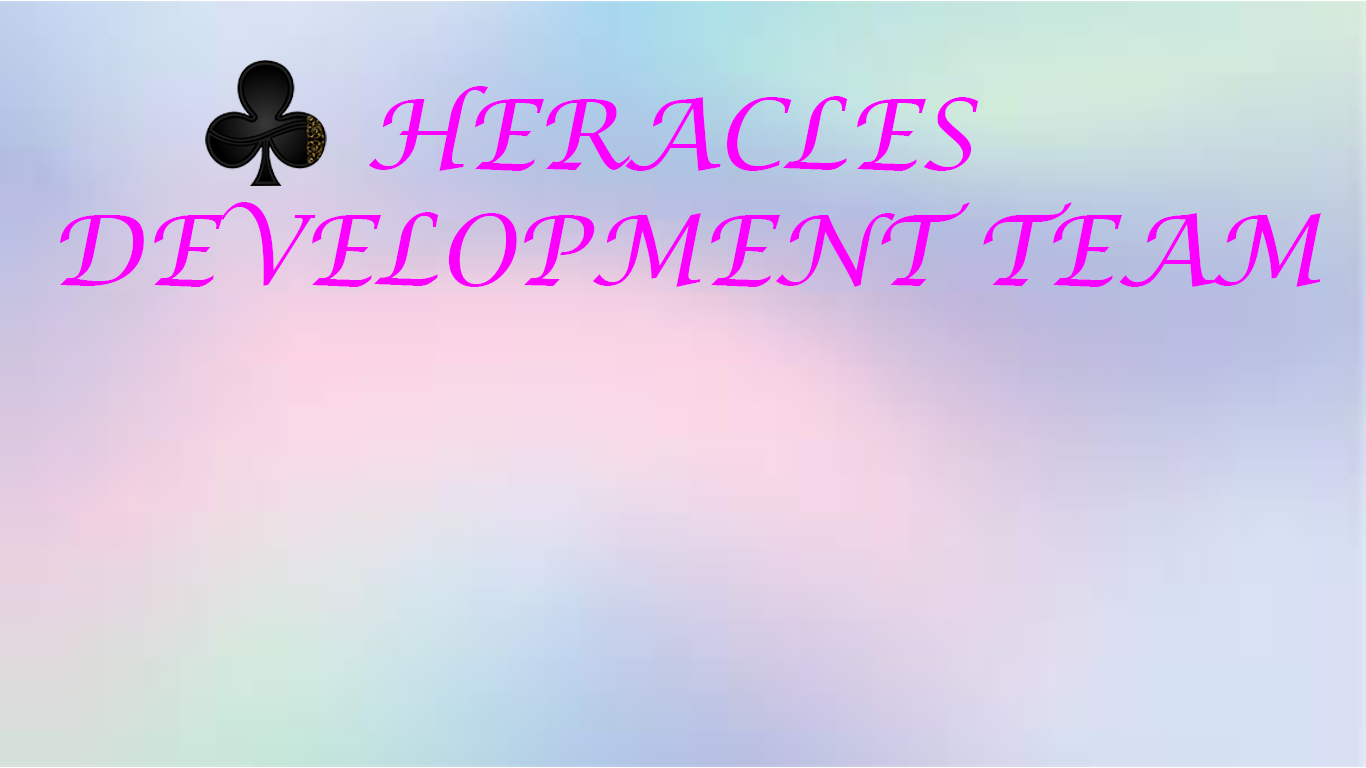
<style>
.page{position:relative;width:1366px;height:768px}
.page>*{position:absolute;margin:0}
.t1{font:97px "LucidaCalligraphy-Italic";color:#fc00ff}
</style>
<div class="page">
<p class="t1" style="left:60px;top:86px;width:1261px;height:201px;text-align:center">HERACLES <br>DEVELOPMENT TEAM</p>
</div>
